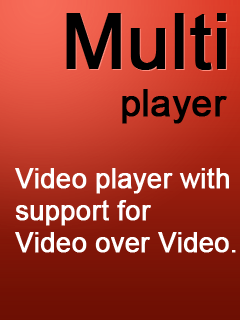
<style>
.page{position:relative;width:240px;height:320px}
.page>*{position:absolute;margin:0}
.t1{font:75.6px "ArialMT";color:#000000;font-weight:bold}
.t2{font:36.8px "ArialMT";color:#000000;font-weight:bold}
.t3{font:26.7px "ArialMT";color:#ffffff;font-weight:bold}
</style>
<div class="page">
<p class="t1" style="left:66px;top:13px;width:160px;height:57px">Multi</p>
<p class="t2" style="left:122px;top:89px;width:105px;height:35px">player</p>
<p class="t3" style="left:15px;top:168px;width:221px;height:85px">Video player with<br>support for<br>Video over Video.</p>
</div>
